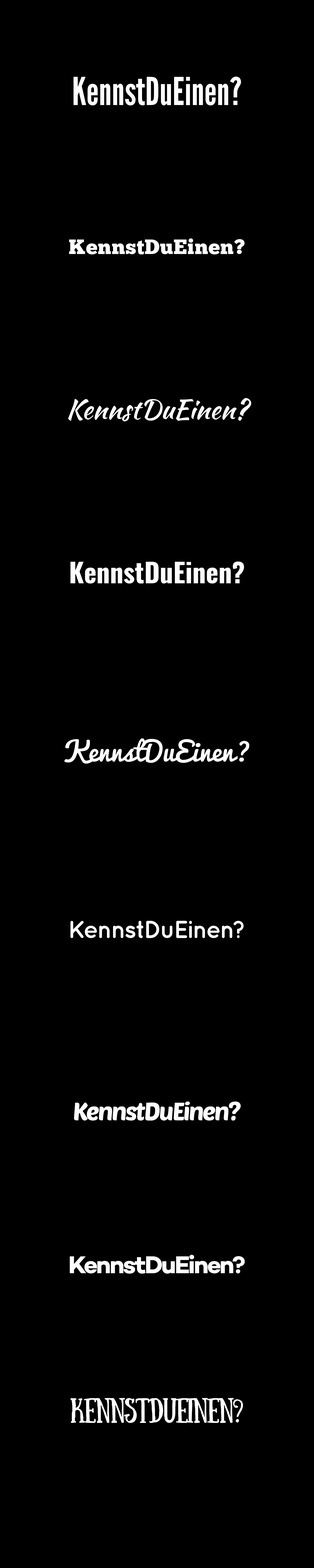
<style>
.page{position:relative;width:314px;height:1568px;background:#000000}
.page>*{position:absolute;margin:0}
.t1{font:38.4px "LeagueGothic-Regular";color:#ffffff}
.t2{font:20.8px "ChunkFive";letter-spacing:0.02em;color:#ffffff}
.t3{font:26.7px "KaushanScript-Regular";color:#ffffff}
.t4{font:26.7px "Oswald-Bold";color:#ffffff}
.t5{font:26.7px "Pacifico";color:#ffffff}
.t6{font:24.7px "Quicksand-Bold";letter-spacing:-0.06em;color:#ffffff}
.t7{font:24.7px "PoetsenOne-Regular";letter-spacing:-0.06em;color:#ffffff}
.t8{font:24.7px "Campton-BoldDEMO";letter-spacing:-0.06em;color:#ffffff}
.t9{font:24.7px "Sunday-Regular";letter-spacing:-0.06em;color:#ffffff}
</style>
<div class="page">
<p class="t1" style="left:73px;top:76px;width:168px;height:29px">KennstDuEinen?</p>
<p class="t2" style="left:69px;top:238px;width:175px;height:16px">KennstDuEinen?</p>
<p class="t3" style="left:68px;top:398px;width:183px;height:23px">KennstDuEinen?</p>
<p class="t4" style="left:70px;top:562px;width:174px;height:21px">KennstDuEinen?</p>
<p class="t5" style="left:64px;top:738px;width:185px;height:26px">KennstDuEinen?</p>
<p class="t6" style="left:70px;top:921px;width:173px;height:17px">KennstDuEinen?</p>
<p class="t7" style="left:74px;top:1102px;width:166px;height:19px">KennstDuEinen?</p>
<p class="t8" style="left:70px;top:1255px;width:174px;height:19px">KennstDuEinen?</p>
<p class="t9" style="left:70px;top:1398px;width:173px;height:25px">KennstDuEinen?</p>
</div>
